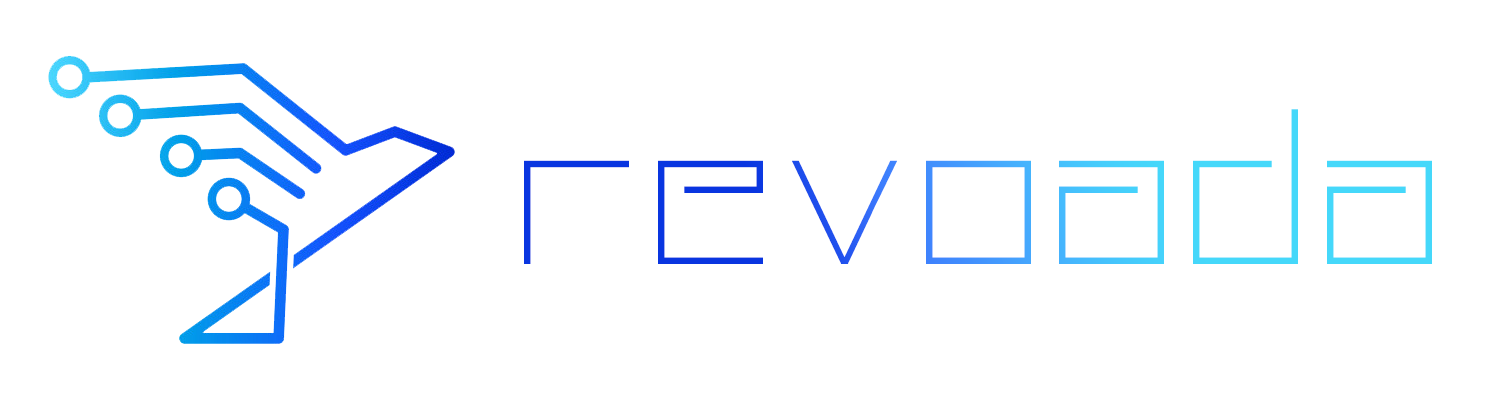
<style>
.page{position:relative;width:1500px;height:400px;background:#ffffff}
.page>*{position:absolute;margin:0}
.t1{font:258px "SquaredDisplay";letter-spacing:0.01em}
</style>
<div class="page">
<p class="t1" style="left:524px;top:109px;width:908px;height:155px">REVOADA</p>
</div>
